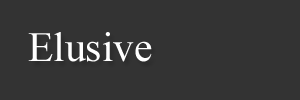
<style>
.page{position:relative;width:300px;height:100px;background:#333333}
.page>*{position:absolute;margin:0}
.t1{font:41.7px "TimesNewRomanPSMT";color:#ffffff}
</style>
<div class="page">
<p class="t1" style="left:28px;top:32px;width:124px;height:30px">Elusive</p>
</div>
